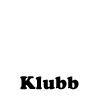
<style>
.page{position:relative;width:100px;height:100px;background:#ffffff}
.page>*{position:absolute;margin:0}
.t1{font:18.8px "CooperBlack";color:#000000}
</style>
<div class="page">
<p class="t1" style="left:20px;top:76px;width:59px;height:14px">Klubb</p>
</div>
